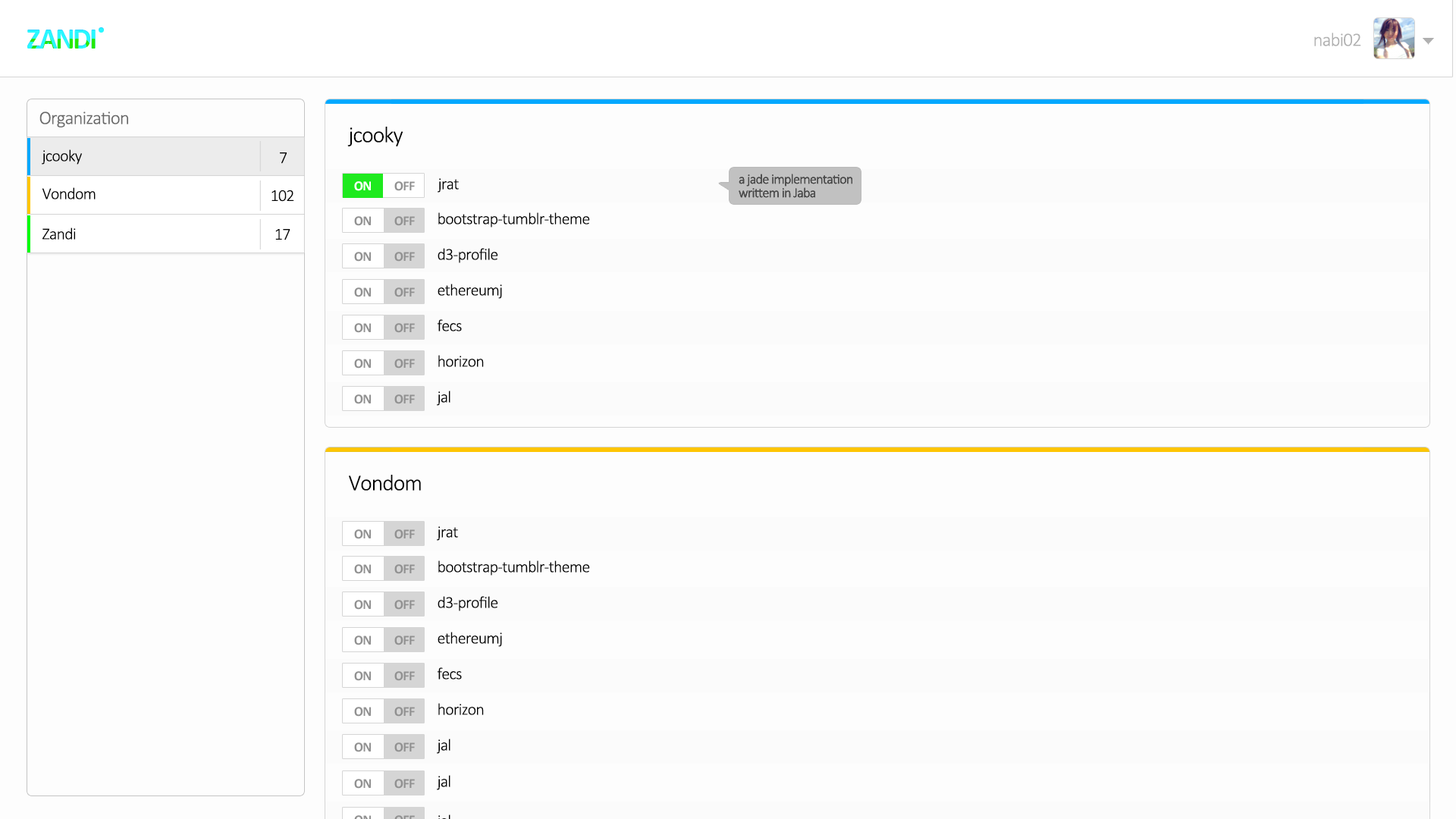
<style>
.page{position:relative;width:1456px;height:819px;background:#fdfdfd}
.page>*{position:absolute;margin:0}
.t1{font:19px "Calibri-Light";letter-spacing:-0.035em;color:#b1b1b1}
.t2{font:19px "Calibri-Light";letter-spacing:-0.035em;color:#696969}
.t3{font:22.7px "Calibri-Light";letter-spacing:-0.035em;color:#000000}
.t4{font:16.7px "Calibri-Light";letter-spacing:-0.035em;color:#010101}
.t5{font:16.7px "Calibri-Light";letter-spacing:-0.035em;color:#000000}
.t6{font:13.6px "Calibri-Bold";letter-spacing:-0.035em;color:#ffffff}
.t7{font:13.6px "Calibri-Bold";letter-spacing:-0.035em;color:#919191}
</style>
<div class="page">
<p class="t1" style="left:1314px;top:33px;width:47px;height:13px">nabi02</p>
<p class="t2" style="left:39px;top:111px;width:89px;height:16px">Organization</p>
<p class="t3" style="left:347px;top:127px;width:56px;height:19px">jcooky</p>
<p class="t4" style="left:42px;top:149px;width:40px;height:16px">jcooky</p>
<p class="t5" style="left:280px;top:152px;width:7px;height:12px">7</p>
<p class="t6" style="left:354px;top:181px;width:17px;height:10px">ON</p>
<p class="t7" style="left:394px;top:181px;width:21px;height:10px">OFF</p>
<p class="t4" style="left:438px;top:178px;width:21px;height:15px">jrat</p>
<p class="t4" style="left:42px;top:187px;width:54px;height:12px">Vondom</p>
<p class="t5" style="left:271px;top:190px;width:23px;height:12px">102</p>
<p class="t4" style="left:438px;top:212px;width:152px;height:15px">bootstrap-tumblr-theme</p>
<p class="t4" style="left:42px;top:227px;width:34px;height:13px">Zandi</p>
<p class="t5" style="left:275px;top:229px;width:15px;height:11px">17</p>
<p class="t4" style="left:438px;top:248px;width:60px;height:15px">d3-profile</p>
<p class="t4" style="left:438px;top:284px;width:64px;height:15px">ethereumj</p>
<p class="t4" style="left:437px;top:319px;width:25px;height:12px">fecs</p>
<p class="t4" style="left:438px;top:355px;width:46px;height:12px">horizon</p>
<p class="t4" style="left:437px;top:391px;width:13px;height:15px">jal</p>
<p class="t3" style="left:349px;top:475px;width:72px;height:16px">Vondom</p>
<p class="t7" style="left:354px;top:529px;width:17px;height:10px">ON</p>
<p class="t7" style="left:394px;top:529px;width:21px;height:10px">OFF</p>
<p class="t4" style="left:437px;top:526px;width:21px;height:15px">jrat</p>
<p class="t4" style="left:438px;top:560px;width:152px;height:16px">bootstrap-tumblr-theme</p>
<p class="t4" style="left:438px;top:596px;width:60px;height:15px">d3-profile</p>
<p class="t4" style="left:438px;top:632px;width:64px;height:15px">ethereumj</p>
<p class="t4" style="left:437px;top:667px;width:25px;height:12px">fecs</p>
<p class="t4" style="left:438px;top:703px;width:46px;height:12px">horizon</p>
<p class="t4" style="left:437px;top:739px;width:13px;height:15px">jal</p>
<p class="t4" style="left:437px;top:775px;width:13px;height:15px">jal</p>
</div>
